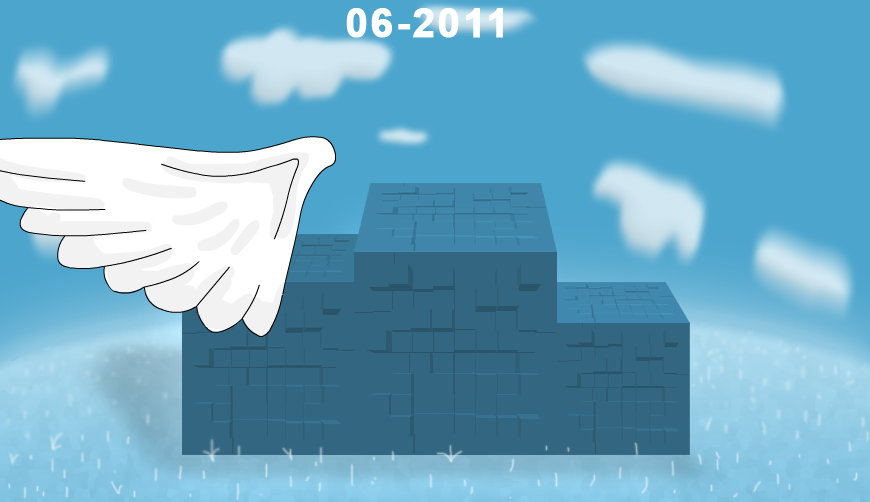
<style>
.page{position:relative;width:870px;height:502px;background:#4ca5cd}
.page>*{position:absolute;margin:0}
.t1{font:40px "Arial-BoldMT";letter-spacing:0.05em;color:#ffffff;font-weight:bold}
</style>
<div class="page">
<p class="t1" style="left:346px;top:8px;width:157px;height:30px">06-2011</p>
</div>
